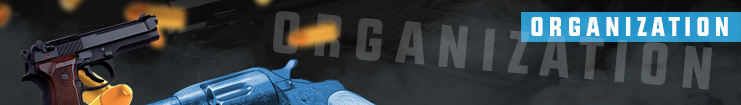
<style>
.page{position:relative;width:741px;height:105px}
.page>*{position:absolute;margin:0}
.t1{font:27px "UpboltersNew";letter-spacing:0.18em;color:#ffffff;text-transform:uppercase}
</style>
<div class="page">
<p class="t1" style="left:531px;top:17px;width:197px;height:19px">organization</p>
</div>
